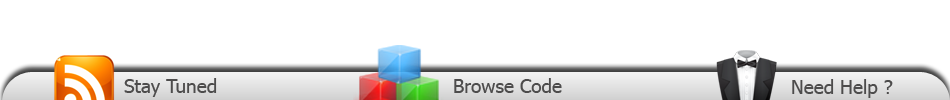
<style>
.page{position:relative;width:950px;height:100px;background:#ffffff}
.page>*{position:absolute;margin:0}
.t1{font:19px "Tahoma";color:#4d4c4c}
</style>
<div class="page">
<p class="t1" style="left:124px;top:78px;width:93px;height:19px">Stay Tuned</p>
<p class="t1" style="left:454px;top:78px;width:108px;height:15px">Browse Code</p>
<p class="t1" style="left:792px;top:79px;width:101px;height:19px">Need Help ?</p>
</div>
